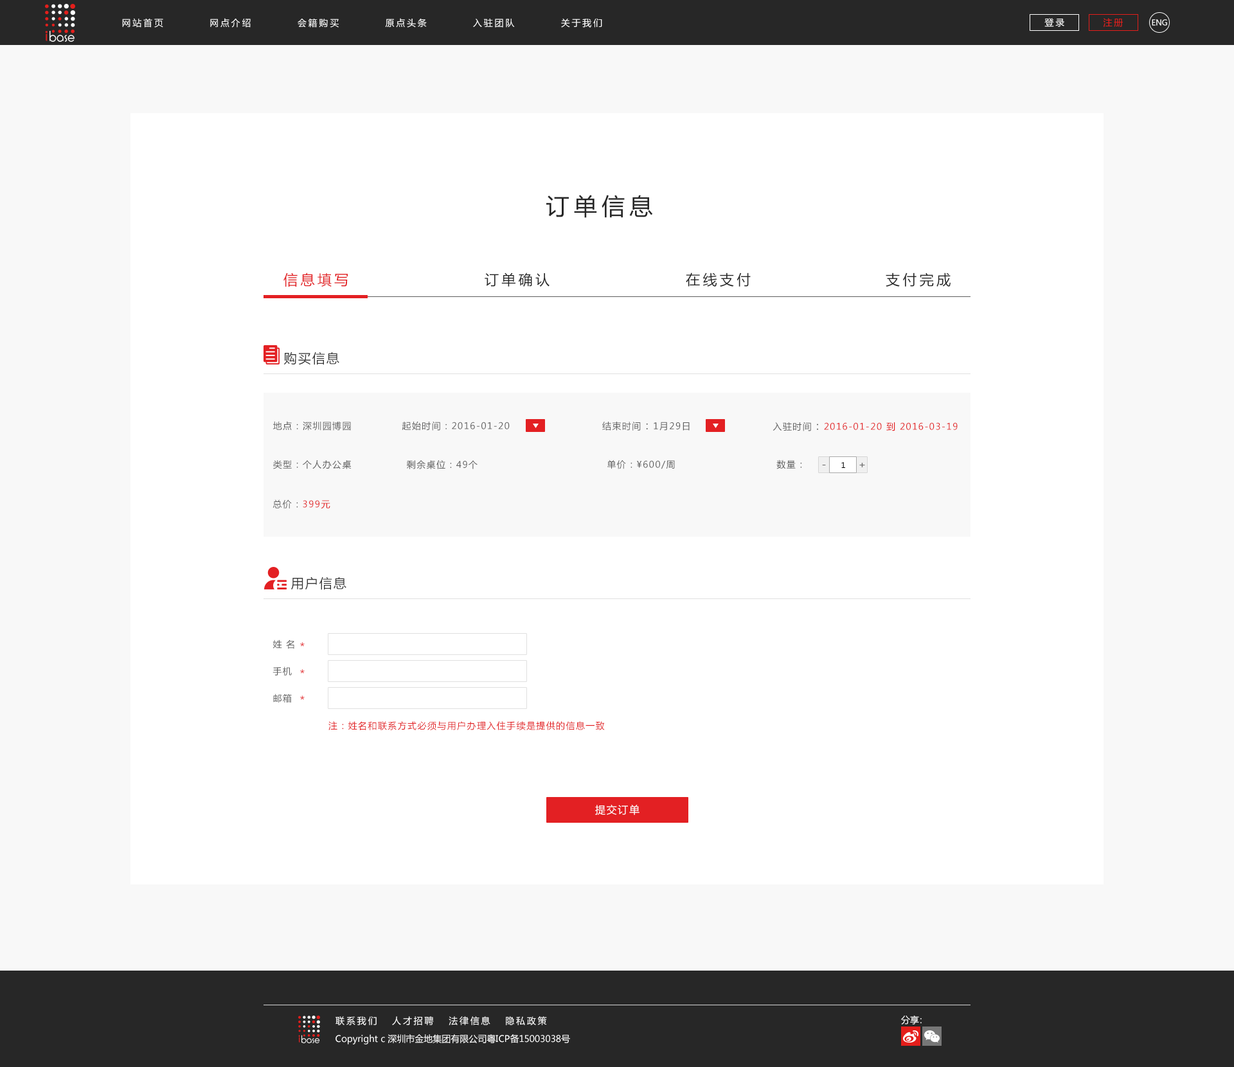
<style>
.page{position:relative;width:1234px;height:1067px;background:#ffffff}
.page>*{position:absolute;margin:0}
.t1{font:9px "MicrosoftYaHei";letter-spacing:0.2em;color:#ffffff}
.t2{font:9px "MicrosoftYaHei";letter-spacing:0.2em;color:#e41e1b}
.t3{font:7.7px "MicrosoftYaHei";letter-spacing:-0.01em;color:#ffffff}
.t4{font:23.1px "MicrosoftYaHei";letter-spacing:0.2em;color:#272727;text-transform:uppercase}
.t5{font:14.1px "MicrosoftYaHei";letter-spacing:0.2em;color:#e32023;text-transform:uppercase}
.t6{font:14.1px "MicrosoftYaHei";letter-spacing:0.2em;color:#272727;text-transform:uppercase}
.t7{font:9px "MicrosoftYaHei";letter-spacing:0.1em;color:#ffffff;text-transform:uppercase}
.t8{font:12.9px "MicrosoftYaHei";letter-spacing:0.1em;color:#373737;text-transform:uppercase}
.t9{font:10.3px "MicrosoftYaHei";letter-spacing:0.1em;color:#ffffff;text-transform:uppercase}
.t10{font:9px "MicrosoftYaHei";letter-spacing:0.1em;color:#5e5e5e;text-transform:uppercase}
.t11{font:10.3px "MicrosoftYaHei";letter-spacing:0.1em;color:#5e5e5e;text-transform:uppercase}
.t12{font:9px "MicrosoftYaHei";letter-spacing:0.1em;color:#e32023;text-transform:uppercase}
.t13{font:10.3px "MicrosoftYaHei";color:#646464;text-transform:uppercase}
.t14{font:7.7px "MicrosoftYaHei";color:#010101;text-transform:uppercase}
.t15{font:10.3px "MicrosoftYaHei";letter-spacing:0.1em;color:#e32023;text-transform:uppercase}
.t16{font:9px "MicrosoftYaHei";letter-spacing:-0.3em;color:#ffffff}
.t17{font:9px "MicrosoftYaHei";color:#ffffff}
</style>
<div class="page">
<p class="t1" style="left:122px;top:18px;width:480px;height:10px">网站首页          网点介绍          会籍购买          原点头条          入驻团队          关于我们</p>
<p class="t1" style="left:1045px;top:18px;width:20px;height:9px">登录</p>
<p class="t2" style="left:1103px;top:18px;width:20px;height:9px">注册</p>
<p class="t3" style="left:1152px;top:19px;width:15px;height:7px">ENG</p>
<p class="t4" style="left:546px;top:195px;width:107px;height:23px">订单信息</p>
<p class="t5" style="left:284px;top:273px;width:64px;height:14px">信息填写</p>
<p class="t6" style="left:485px;top:273px;width:65px;height:14px">订单确认</p>
<p class="t6" style="left:686px;top:273px;width:65px;height:14px">在线支付</p>
<p class="t6" style="left:886px;top:273px;width:65px;height:14px">支付完成</p>
<p class="t7" style="left:284px;top:352px;width:405px;height:13px"><span class="t8">购买信息              </span><span class="t9">起始时间：</span>2016-01-20                      <span class="t9">入驻周期：</span>深圳园博园</p>
<p class="t10" style="left:273px;top:421px;width:78px;height:10px">地点：深圳园博园</p>
<p class="t10" style="left:402px;top:421px;width:108px;height:10px">起始时间：2016-01-20</p>
<p class="t10" style="left:602px;top:422px;width:88px;height:9px">结束时间<span class="t11">：</span>1月29日</p>
<p class="t12" style="left:773px;top:422px;width:185px;height:9px"><span class="t10">入驻时间</span><span class="t11">：</span>2016-01-20 到 2016-03-19</p>
<p class="t10" style="left:273px;top:460px;width:79px;height:9px">类型：个人办公桌</p>
<p class="t10" style="left:406px;top:460px;width:72px;height:9px">剩余桌位：49个</p>
<p class="t10" style="left:608px;top:460px;width:67px;height:9px">单价：¥600/周</p>
<p class="t10" style="left:777px;top:460px;width:25px;height:9px">数量：</p>
<p class="t13" style="left:822px;top:465px;width:4px;height:0px">-</p>
<p class="t14" style="left:842px;top:462px;width:3px;height:6px">1</p>
<p class="t13" style="left:860px;top:463px;width:5px;height:4px">+</p>
<p class="t12" style="left:273px;top:500px;width:57px;height:9px"><span class="t10">   总价：</span>399元</p>
<p class="t7" style="left:291px;top:577px;width:405px;height:13px"><span class="t8">用户信息              </span><span class="t9">起始时间：</span>2016-01-20                      <span class="t9">入驻周期：</span>深圳园博园</p>
<p class="t10" style="left:273px;top:640px;width:21px;height:9px">姓 名</p>
<p class="t15" style="left:300px;top:642px;width:5px;height:5px">*</p>
<p class="t10" style="left:273px;top:667px;width:19px;height:9px">手机</p>
<p class="t15" style="left:300px;top:669px;width:5px;height:5px">*</p>
<p class="t10" style="left:273px;top:694px;width:19px;height:9px">邮箱</p>
<p class="t15" style="left:300px;top:696px;width:5px;height:4px">*</p>
<p class="t12" style="left:328px;top:721px;width:277px;height:9px">注：姓名和联系方式必须与用户办理入住手续是提供的信息一致</p>
<p class="t9" style="left:595px;top:805px;width:45px;height:10px">提交订单</p>
<p class="t1" style="left:336px;top:1016px;width:211px;height:9px">联系我们   人才招聘   法律信息   隐私政策</p>
<p class="t16" style="left:901px;top:1016px;width:21px;height:9px"><span class="t17">分</span>享：</p>
<p class="t17" style="left:336px;top:1034px;width:234px;height:11px">Copyright c 深圳市金地集团有限公司粤ICP备15003038号</p>
</div>
